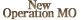
<style>
.page{position:relative;width:81px;height:20px;background:#ffffff}
.page>*{position:absolute;margin:0}
.t1{font:12px/8px "RyuminPro-ExBold";letter-spacing:-0.08em;color:#746046;font-weight:bold}
</style>
<div class="page">
<p class="t1" style="left:3px;top:0px;width:74px;height:20px;text-align:center">New<br>Operation MO</p>
</div>
